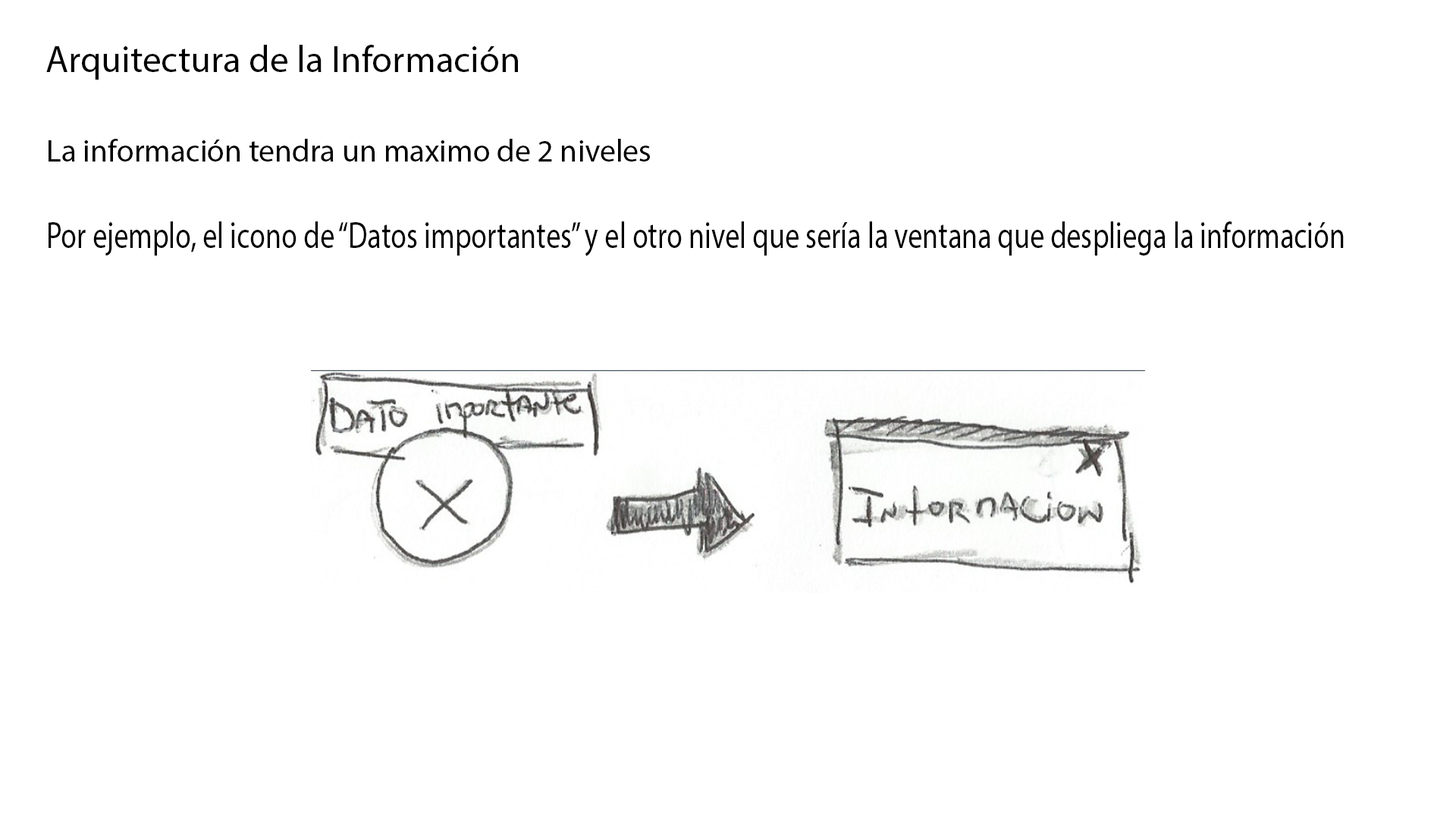
<style>
.page{position:relative;width:1456px;height:819px;background:#ffffff}
.page>*{position:absolute;margin:0}
.t1{font:37.3px "MyriadPro-Regular";color:#000000}
.t2{font:31.5px "MyriadPro-Regular";color:#000000}
.t3{font:37.2px "MyriadPro-Regular";color:#000000;scale:0.78 1}
</style>
<div class="page">
<p class="t1" style="left:46px;top:45px;width:472px;height:35px">Arquitectura de la Información</p>
<p class="t2" style="left:49px;top:139px;width:601px;height:23px">La información tendra un maximo de 2 niveles</p>
<p class="t3" style="left:49px;top:221px;width:1295px;height:35px">Por ejemplo, el icono de “Datos importantes” y el otro nivel que sería la ventana que despliega la información</p>
</div>
